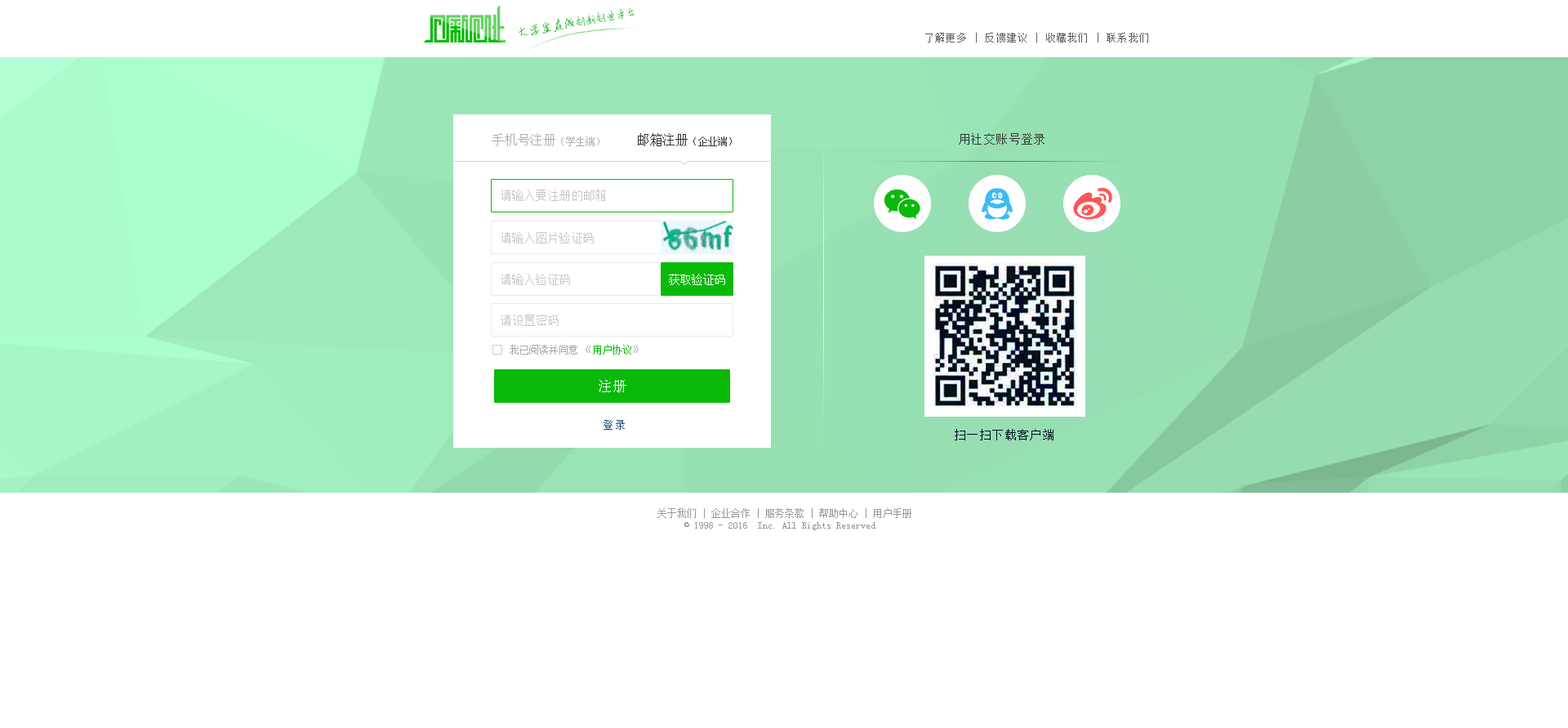
<style>
.page{position:relative;width:1568px;height:728px;background:#ffffff}
.page>*{position:absolute;margin:0}
.t1{font:11.2px "AnJingCheng-Xing-2.0";letter-spacing:-0.01em;color:#09ba08}
.t2{font:12.6px "AnJingCheng-Xing-2.0";letter-spacing:-0.01em;color:#09ba08}
.t3{font:9.8px "SimSun";letter-spacing:0.1em;color:#606060}
.t4{font:13.1px "SimSun";color:#adadad}
.t5{font:9.8px "SimSun";color:#adadad}
.t6{font:9.8px "SimSun";color:#333333}
.t7{font:13.1px "SimSun";color:#333333}
.t8{font:11.4px "SimSun";letter-spacing:0.1em;color:#333333}
.t9{font:11.4px "SimSun";color:#c9c8c8}
.t10{font:11.4px "SimSun";color:#ffffff}
.t11{font:9.8px "SimSun";color:#aaaaaa}
.t12{font:9.8px "SimSun";color:#09ba08}
.t13{font:14.7px "SimSun";color:#ffffff}
.t14{font:10.6px "SimSun";letter-spacing:0.1em;color:#1a487b}
.t15{font:11.4px "SimSun";letter-spacing:0.1em;color:#010a23}
.t16{font:9.8px "SimSun";color:#999999}
</style>
<div class="page">
<p class="t1" style="left:519px;top:7px;width:116px;height:29px;rotate:-10deg"><span class="t2">大学生在线</span>创新创业平台</p>
<p class="t3" style="left:925px;top:33px;width:223px;height:9px">了解更多 | 反馈建议 | 收藏我们 | 联系我们</p>
<p class="t4" style="left:492px;top:133px;width:107px;height:13px">手机号注册<span class="t5">（学生端）</span></p>
<p class="t6" style="left:638px;top:133px;width:94px;height:13px"><span class="t7">邮箱注册</span>（企业端）</p>
<p class="t8" style="left:959px;top:133px;width:86px;height:12px">用社交账号登录</p>
<p class="t9" style="left:501px;top:189px;width:105px;height:12px">请输入要注册的邮箱</p>
<p class="t9" style="left:501px;top:232px;width:93px;height:11px">请输入图片验证码</p>
<p class="t9" style="left:501px;top:274px;width:69px;height:11px">请输入验证码</p>
<p class="t10" style="left:669px;top:274px;width:56px;height:11px">获取验证码</p>
<p class="t9" style="left:501px;top:314px;width:58px;height:12px">请设置密码</p>
<p class="t11" style="left:510px;top:345px;width:129px;height:9px">我已阅读并同意 《<span class="t12">用户协议</span>》</p>
<p class="t13" style="left:599px;top:380px;width:27px;height:13px">注册</p>
<p class="t14" style="left:604px;top:420px;width:21px;height:10px">登录</p>
<p class="t15" style="left:955px;top:429px;width:99px;height:11px">扫一扫下载客户端</p>
<p class="t16" style="left:657px;top:508px;width:254px;height:22px;text-align:center">关于我们 | 企业合作 | 服务条款 | 帮助中心 | 用户手册<br>© 1998 - 2016  Inc. All Rights Reserved</p>
</div>
